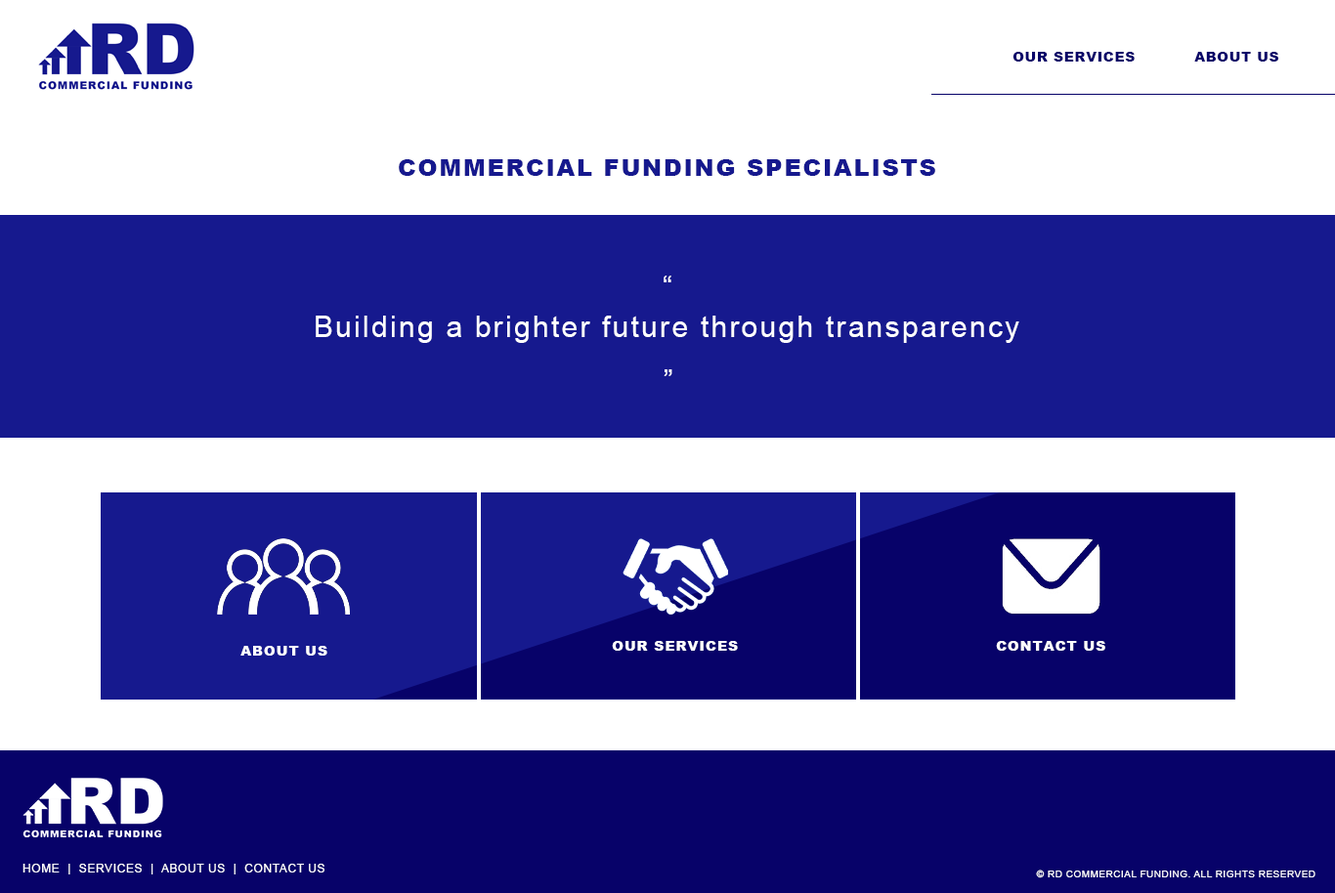
<style>
.page{position:relative;width:1335px;height:893px;background:#ffffff}
.page>*{position:absolute;margin:0}
.t1{font:13.7px "Arial-Black";letter-spacing:0.05em;color:#070269}
.t2{font:23.5px "Arial-Black";letter-spacing:0.075em;color:#16198e}
.t3{font:29.3px "ArialMT";letter-spacing:0.05em;color:#ffffff}
.t4{font:29.3px "ArialMT";letter-spacing:0.075em;color:#ffffff}
.t5{font:13.7px "Arial-Black";letter-spacing:0.075em;color:#ffffff}
.t6{font:11.7px "ArialMT";letter-spacing:0.05em;color:#ffffff}
.t7{font:9.8px "ArialMT";letter-spacing:0.05em;color:#ffffff}
</style>
<div class="page">
<p class="t1" style="left:1012px;top:52px;width:123px;height:10px">OUR SERVICES</p>
<p class="t1" style="left:1194px;top:52px;width:84px;height:10px">ABOUT US</p>
<p class="t2" style="left:399px;top:159px;width:536px;height:17px">COMMERCIAL FUNDING SPECIALISTS</p>
<p class="t3" style="left:664px;top:276px;width:7px;height:6px">“</p>
<p class="t4" style="left:316px;top:316px;width:703px;height:27px">Building a brighter future through transparency</p>
<p class="t3" style="left:664px;top:369px;width:8px;height:7px;rotate:180deg">“</p>
<p class="t5" style="left:612px;top:641px;width:126px;height:10px">OUR SERVICES</p>
<p class="t5" style="left:996px;top:641px;width:109px;height:10px">CONTACT US</p>
<p class="t5" style="left:240px;top:646px;width:87px;height:10px">ABOUT US</p>
<p class="t6" style="left:22px;top:864px;width:302px;height:11px">HOME  |  SERVICES  |  ABOUT US  |  CONTACT US</p>
<p class="t7" style="left:1036px;top:870px;width:279px;height:9px">© RD COMMERCIAL FUNDING. ALL RIGHTS RESERVED</p>
</div>
